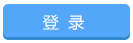
<style>
.page{position:relative;width:133px;height:43px;background:#54a6fa}
.page>*{position:absolute;margin:0}
.t1{font:16px "MicrosoftYaHei";color:#ffffff}
</style>
<div class="page">
<p class="t1" style="left:42px;top:14px;width:43px;height:16px">登  录</p>
</div>
